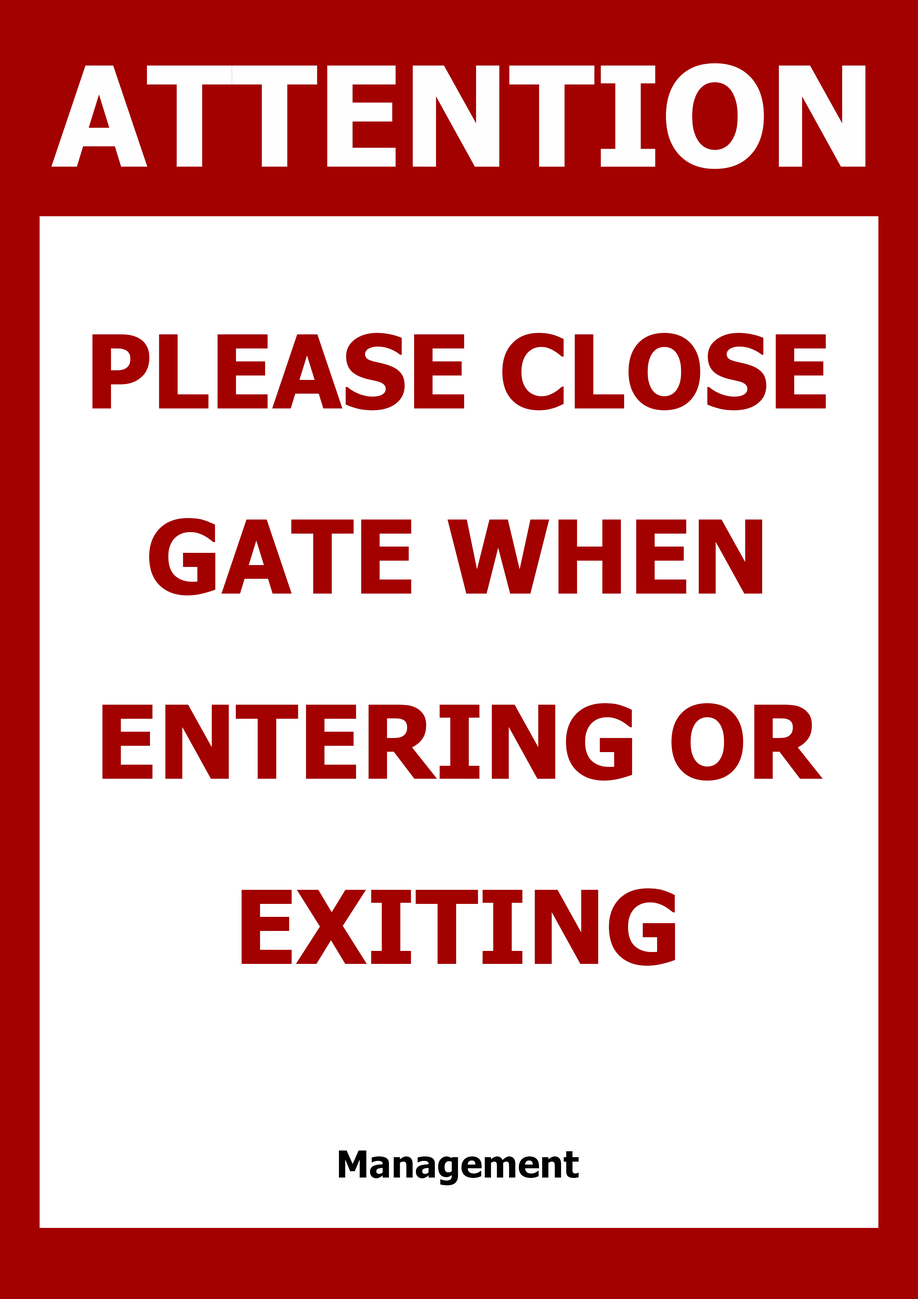
<style>
.page{position:relative;width:918px;height:1299px;background:#ffffff}
.page>*{position:absolute;margin:0}
.t1{font:138.8px "Tahoma-Bold";color:#fefefe}
.t2{font:101.8px/185.1px "Tahoma-Bold";color:#a30000}
.t3{font:37px "Tahoma-Bold";color:#000000}
</style>
<div class="page">
<p class="t1" style="left:51px;top:63px;width:815px;height:106px">ATTENTION</p>
<p class="t2" style="left:92px;top:333px;width:734px;height:633px;text-align:center">PLEASE CLOSE<br>GATE WHEN<br>ENTERING OR<br>EXITING</p>
<p class="t3" style="left:339px;top:1150px;width:240px;height:35px">Management</p>
</div>
